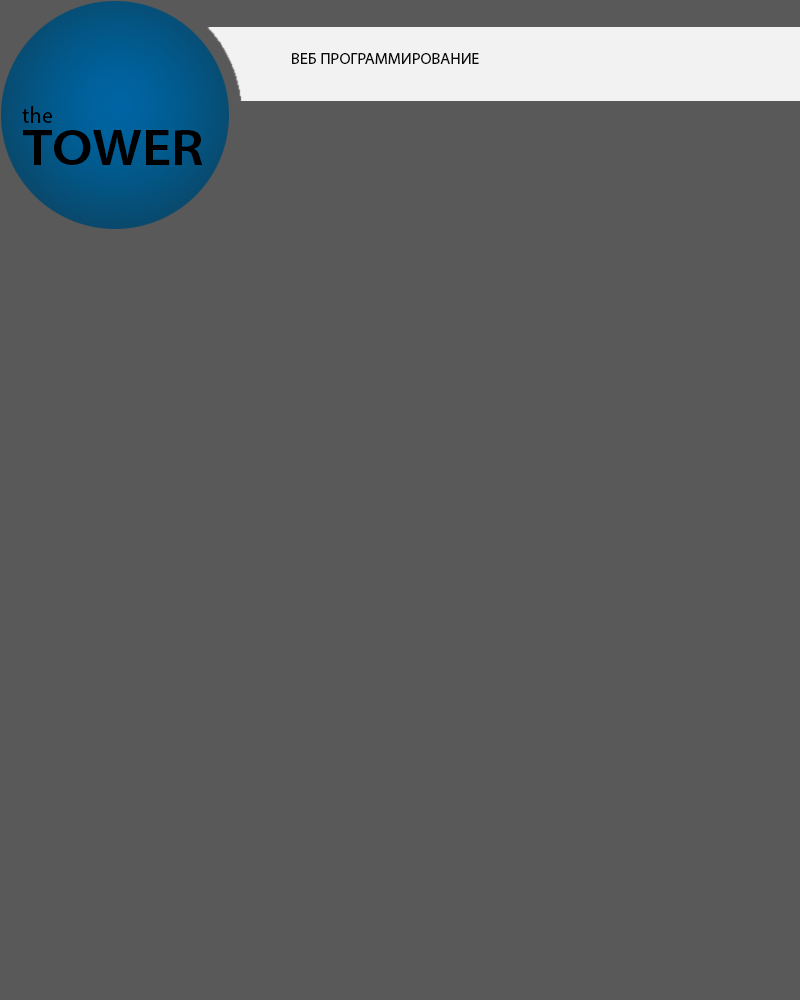
<style>
.page{position:relative;width:800px;height:1000px;background:#595959}
.page>*{position:absolute;margin:0}
.t1{font:16.3px "MyriadPro-Regular";color:#0a0a0a}
.t2{font:23px "MyriadPro-Regular";color:#000000}
.t3{font:50.6px "MyriadPro-Semibold";color:#000000;scale:1.13 1}
</style>
<div class="page">
<p class="t1" style="left:292px;top:53px;width:187px;height:11px">ВЕБ ПРОГРАММИРОВАНИЕ</p>
<p class="t2" style="left:22px;top:106px;width:31px;height:17px">the</p>
<p class="t3" style="left:23px;top:130px;width:180px;height:35px">TOWER</p>
</div>
